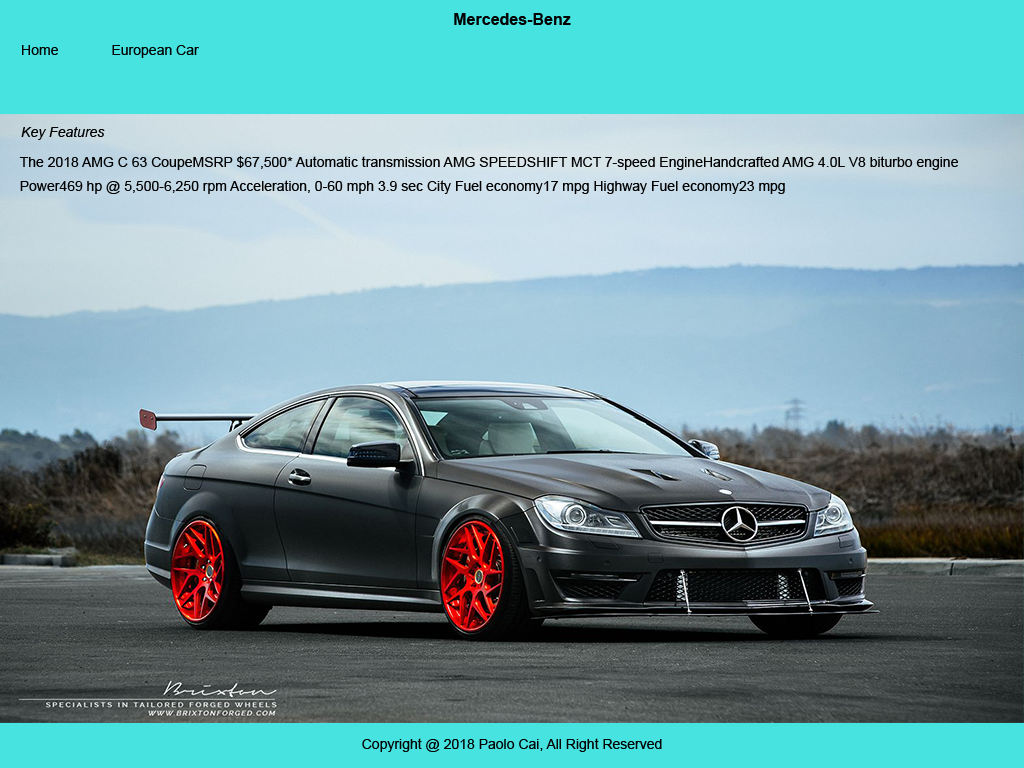
<style>
.page{position:relative;width:1024px;height:768px}
.page>*{position:absolute;margin:0}
.t1{font:16px "Arial-BoldMT";color:#020202}
.t2{font:14px "ArialMT";color:#020202}
.t3{font:14px "Arial-ItalicMT";color:#020202}
.t4{font:14px/24px "ArialMT";color:#020202}
</style>
<div class="page">
<p class="t1" style="left:454px;top:13px;width:117px;height:12px">Mercedes-Benz</p>
<p class="t2" style="left:22px;top:45px;width:36px;height:10px">Home</p>
<p class="t2" style="left:112px;top:45px;width:87px;height:13px">European Car</p>
<p class="t3" style="left:21px;top:127px;width:84px;height:13px">Key Features</p>
<p class="t4" style="left:19px;top:156px;width:939px;height:38px">The 2018 AMG C 63 CoupeMSRP $67,500* Automatic transmission AMG SPEEDSHIFT MCT 7-speed EngineHandcrafted AMG 4.0L V8 biturbo engine <br>Power469 hp @ 5,500-6,250 rpm Acceleration, 0-60 mph 3.9 sec City Fuel economy17 mpg Highway Fuel economy23 mpg</p>
<p class="t2" style="left:362px;top:738px;width:300px;height:14px">Copyright @ 2018 Paolo Cai, All Right Reserved</p>
</div>
